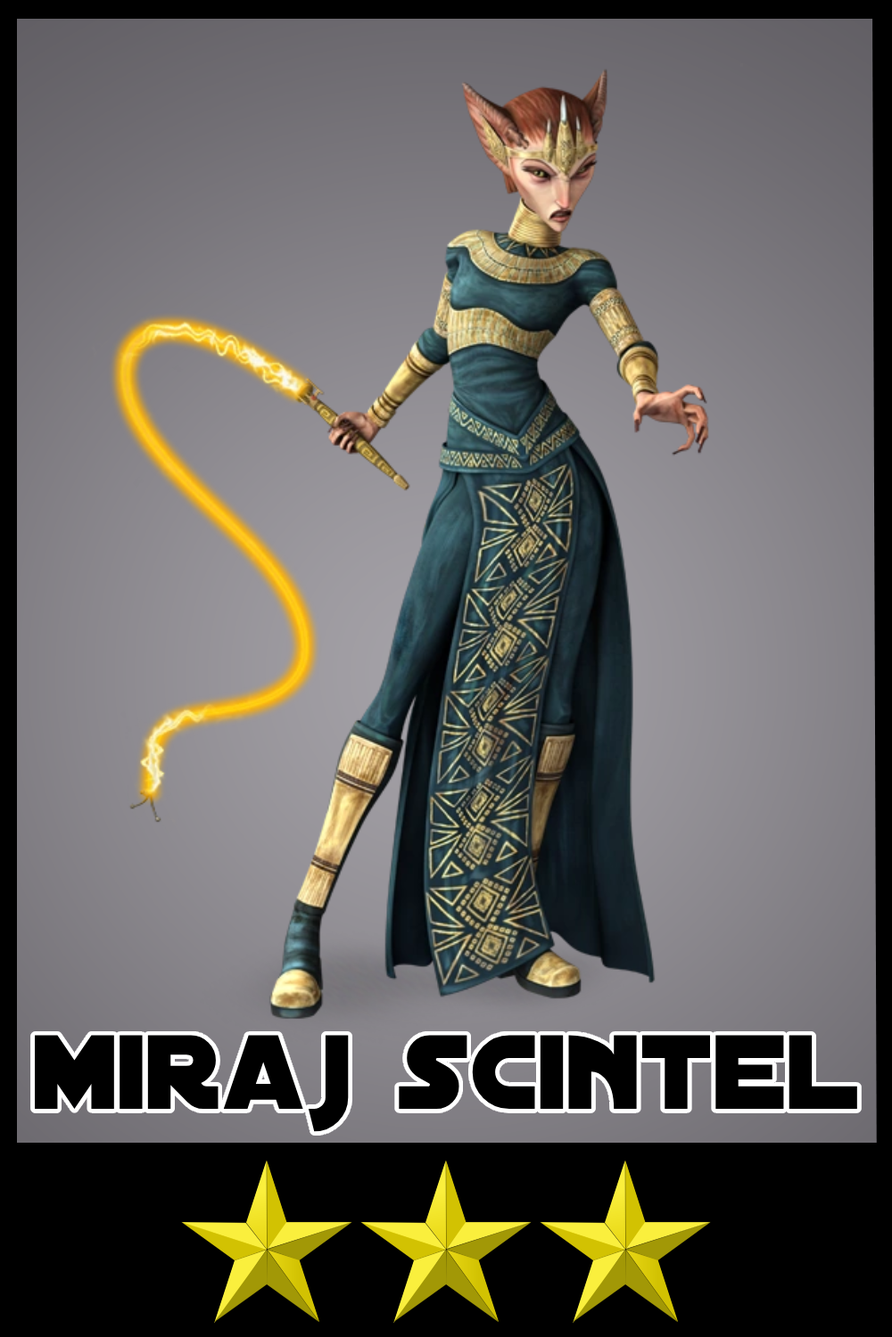
<style>
.page{position:relative;width:892px;height:1337px}
.page>*{position:absolute;margin:0}
.t1{font:113px "DistantGalaxy";color:#000000}
</style>
<div class="page">
<p class="t1" style="left:35px;top:1035px;width:822px;height:97px">miraj scintel</p>
</div>
